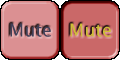
<style>
.page{position:relative;width:120px;height:60px;background:#db9092}
.page>*{position:absolute;margin:0}
.t1{font:18px "LucidaSans";color:#414058}
.t2{font:18px "LucidaSans";color:#cebe38}
</style>
<div class="page">
<p class="t1" style="left:10px;top:23px;width:41px;height:14px">Mute</p>
<p class="t2" style="left:70px;top:23px;width:41px;height:14px">Mute</p>
</div>
